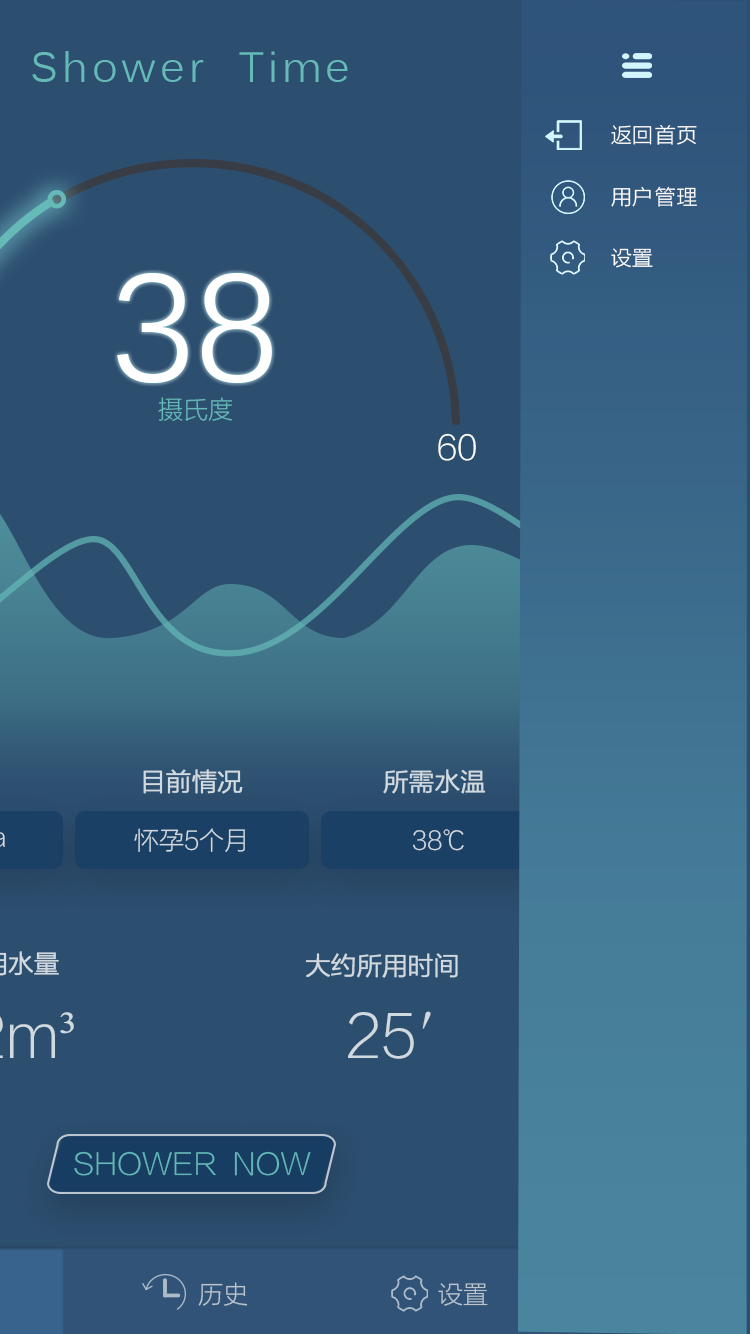
<style>
.page{position:relative;width:750px;height:1334px;background:#2c4e6f}
.page>*{position:absolute;margin:0}
.t1{font:41.7px "Kalinga";letter-spacing:0.1em;color:#65bab8}
.t2{font:20.8px "FZLTXHJW--GB1-0";letter-spacing:0.05em;color:#ffffff}
.t3{font:150px "Kalinga";color:#ffffff}
.t4{font:25px "FZLTXHJW--GB1-0";color:#65bab8}
.t5{font:33.3px "FZLTXHJW--GB1-0";color:#f9fcfc}
.t6{font:25px "FZLTXHJW--GB1-0";color:#d0dae0;font-weight:bold}
.t7{font:25px "FZLTXHJW--GB1-0";color:#d0d9e0}
.t8{font:25px "FZLTXHJW--GB1-0";color:#d0d9e0;font-weight:bold}
.t9{font:58.3px "FZLTXHJW--GB1-0";color:#d0d9e0}
.t10{font:29.2px "FZLTXHJW--GB1-0";color:#63b7b6}
.t11{font:25px "FZLTXHJW--GB1-0";color:#bac4cd}
</style>
<div class="page">
<p class="t1" style="left:32px;top:51px;width:316px;height:31px">Shower  Time</p>
<p class="t2" style="left:611px;top:125px;width:86px;height:20px">返回首页</p>
<p class="t2" style="left:611px;top:186px;width:86px;height:21px">用户管理</p>
<p class="t2" style="left:611px;top:248px;width:42px;height:20px">设置</p>
<p class="t3" style="left:117px;top:273px;width:155px;height:110px">38</p>
<p class="t4" style="left:158px;top:397px;width:74px;height:24px">摄氏度</p>
<p class="t5" style="left:438px;top:433px;width:38px;height:28px">60</p>
<p class="t6" style="left:143px;top:769px;width:100px;height:25px">目前情况</p>
<p class="t6" style="left:383px;top:769px;width:103px;height:25px">所需水温</p>
<p class="t7" style="left:134px;top:828px;width:111px;height:24px">怀孕5个月</p>
<p class="t7" style="left:413px;top:829px;width:51px;height:22px">38℃</p>
<p class="t8" style="left:305px;top:953px;width:153px;height:25px">大约所用时间</p>
<p class="t9" style="left:348px;top:1011px;width:83px;height:48px">25′</p>
<p class="t10" style="left:74px;top:1151px;width:237px;height:25px">SHOWER  NOW</p>
<p class="t11" style="left:198px;top:1282px;width:50px;height:24px">历史</p>
<p class="t11" style="left:438px;top:1283px;width:50px;height:23px">设置</p>
</div>
